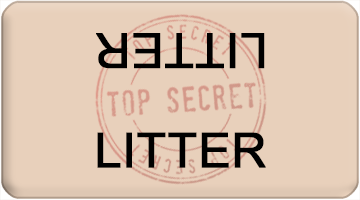
<style>
.page{position:relative;width:360px;height:200px;background:#e8d0bb}
.page>*{position:absolute;margin:0}
.t1{font:48px "ArialMT";color:#000000;font-weight:bold}
</style>
<div class="page">
<p class="t1" style="left:96px;top:33px;width:169px;height:36px;rotate:180deg">LITTER</p>
<p class="t1" style="left:97px;top:132px;width:169px;height:36px">LITTER</p>
</div>
